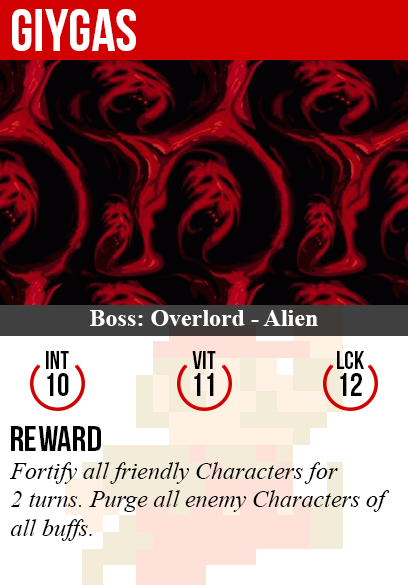
<style>
.page{position:relative;width:408px;height:585px;background:#ffffff}
.page>*{position:absolute;margin:0}
.t1{font:60px "BebasNeue";color:#ffffff}
.t2{font:24px "TimesNewRomanPS-BoldMT";color:#ffffff}
.t3{font:25px "BebasNeue";color:#000000}
.t4{font:32px "BebasNeue";color:#000000}
.t5{font:36px "BebasNeue";color:#000000}
.t6{font:24px "TimesNewRomanPS-ItalicMT";color:#000000}
</style>
<div class="page">
<p class="t1" style="left:12px;top:9px;width:124px;height:42px">giygas</p>
<p class="t2" style="left:90px;top:310px;width:228px;height:16px">Boss: Overlord - Alien</p>
<p class="t3" style="left:46px;top:351px;width:23px;height:18px">INT</p>
<p class="t3" style="left:192px;top:351px;width:24px;height:18px">VIT</p>
<p class="t3" style="left:337px;top:351px;width:27px;height:18px">LCK</p>
<p class="t4" style="left:47px;top:373px;width:22px;height:23px">10</p>
<p class="t4" style="left:194px;top:373px;width:20px;height:23px">11</p>
<p class="t4" style="left:340px;top:373px;width:22px;height:23px">12</p>
<p class="t5" style="left:11px;top:426px;width:90px;height:25px">reward</p>
<p class="t6" style="left:9px;top:462px;width:381px;height:79px">Fortify all friendly Characters for<br>2 turns. Purge all enemy Characters of<br>all buffs.</p>
</div>
